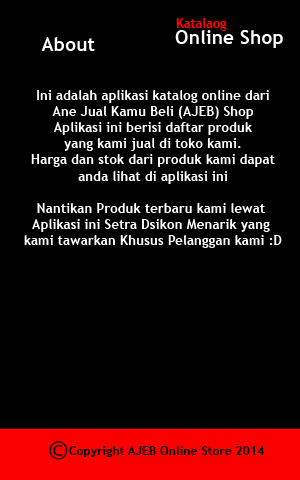
<style>
.page{position:relative;width:300px;height:480px;background:#000000}
.page>*{position:absolute;margin:0}
.t1{font:19.4px "TrebuchetMS-Bold";color:#ffffff}
.t2{font:12.7px "TrebuchetMS-Bold";color:#ff0000}
.t3{font:13.5px "TrebuchetMS-Bold";color:#ffffff}
.t4{font:12.3px "TrebuchetMS-Bold";color:#000000}
</style>
<div class="page">
<p class="t1" style="left:175px;top:30px;width:108px;height:18px">Online Shop</p>
<p class="t2" style="left:176px;top:18px;width:51px;height:13px">Katalaog</p>
<p class="t1" style="left:41px;top:37px;width:54px;height:14px">About</p>
<p class="t3" style="left:24px;top:90px;width:258px;height:158px;text-align:center">Ini adalah aplikasi katalog online dari<br>Ane Jual Kamu Beli (AJEB) Shop<br>Aplikasi ini berisi daftar produk<br>yang kami jual di toko kami.<br>Harga dan stok dari produk kami dapat<br>anda lihat di aplikasi ini<br><br>Nantikan Produk terbaru kami lewat <br>Aplikasi ini Setra Dsikon Menarik yang <br>kami tawarkan Khusus Pelanggan kami :D</p>
<p class="t4" style="left:69px;top:446px;width:195px;height:11px">Copyright AJEB Online Store 2014</p>
</div>
